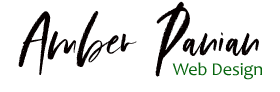
<style>
.page{position:relative;width:280px;height:92px;background:#ffffff}
.page>*{position:absolute;margin:0}
.t1{font:72px "luster-brush";color:#060000}
.t2{font:72px "luster-brush";color:#060000;font-variant:small-caps}
.t3{font:18px "Candara";color:#08660f}
</style>
<div class="page">
<p class="t1" style="left:18px;top:1px;width:241px;height:76px"><span class="t2"><br><br><br></span>Amber Panian</p>
<p class="t3" style="left:172px;top:62px;width:90px;height:18px">Web Design</p>
</div>
